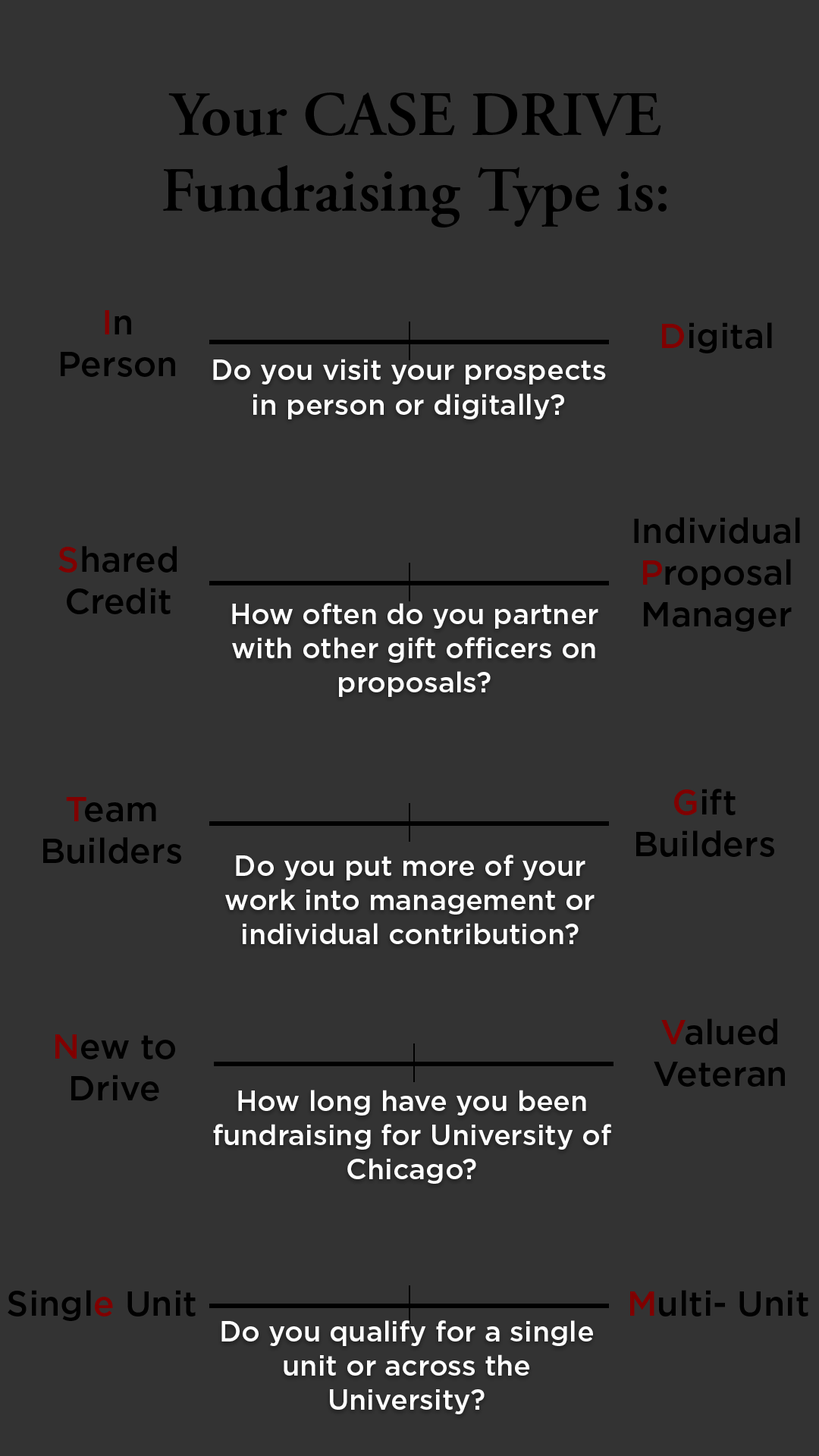
<style>
.page{position:relative;width:819px;height:1456px;background:#333333}
.page>*{position:absolute;margin:0}
.t1{font:63.2px "AGaramondPro-Semibold";color:#000000}
.t2{font:34.8px "Gotham-Medium";color:#000000}
.t3{font:34.8px "Gotham-Medium";color:#800000}
.t4{font:28.7px "Gotham-Medium";color:#fefefe}
.t5{font:28.4px "Gotham-Medium";color:#fefefe}
</style>
<div class="page">
<p class="t1" style="left:163px;top:93px;width:504px;height:134px;text-align:center">Your CASE DRIVE<br>Fundraising Type is:</p>
<p class="t2" style="left:61px;top:310px;width:114px;height:67px;text-align:center"><span class="t3">I</span>n<br>Person</p>
<p class="t2" style="left:662px;top:322px;width:110px;height:31px"><span class="t3">D</span>igital</p>
<p class="t4" style="left:213px;top:359px;width:393px;height:60px;text-align:center">Do you visit your prospects in person or digitally?</p>
<p class="t2" style="left:634px;top:517px;width:166px;height:115px;text-align:center">Individual <span class="t3">P</span>roposal Manager</p>
<p class="t2" style="left:58px;top:546px;width:119px;height:68px;text-align:center"><span class="t3">S</span>hared Credit</p>
<p class="t5" style="left:232px;top:603px;width:366px;height:94px;text-align:center">How often do you partner with other gift officers on proposals?</p>
<p class="t2" style="left:43px;top:797px;width:138px;height:67px;text-align:center"><span class="t3">T</span>eam <br>Builders</p>
<p class="t2" style="left:636px;top:789px;width:138px;height:68px;text-align:center"><span class="t3">G</span>ift <br>Builders</p>
<p class="t5" style="left:225px;top:855px;width:370px;height:89px;text-align:center">Do you put more of your work into management or individual contribution?</p>
<p class="t2" style="left:654px;top:1018px;width:131px;height:69px;text-align:center"><span class="t3">V</span>alued Veteran</p>
<p class="t2" style="left:55px;top:1034px;width:120px;height:67px;text-align:center"><span class="t3">N</span>ew to Drive</p>
<p class="t5" style="left:213px;top:1090px;width:398px;height:94px;text-align:center">How long have you been fundraising for University of Chicago?</p>
<p class="t2" style="left:8px;top:1290px;width:188px;height:31px">Singl<span class="t3">e</span> Unit</p>
<p class="t2" style="left:630px;top:1290px;width:178px;height:26px"><span class="t3">M</span>ulti- Unit</p>
<p class="t5" style="left:221px;top:1320px;width:372px;height:94px;text-align:center">Do you qualify for a single unit or across the University?</p>
</div>
